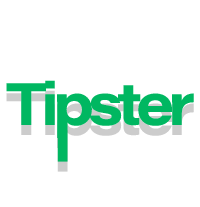
<style>
.page{position:relative;width:200px;height:207px;background:#ffffff}
.page>*{position:absolute;margin:0}
.t1{font:59.4px "AcuminConcept-WideBold";letter-spacing:-0.1em;color:#00b761}
.t2{font:59.4px "AcuminConcept-WideBold";letter-spacing:-0.1em;color:#00b761;text-transform:uppercase}
</style>
<div class="page">
<p class="t1" style="left:6px;top:80px;width:188px;height:58px"><span class="t2">T</span>ipster</p>
</div>
